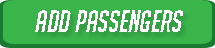
<style>
.page{position:relative;width:215px;height:48px;background:#39b54a}
.page>*{position:absolute;margin:0}
.t1{font:30px "BigNoodleTitling";color:#ffffff;font-style:italic}
</style>
<div class="page">
<p class="t1" style="left:35px;top:10px;width:148px;height:22px">add passengers</p>
</div>
